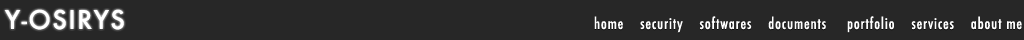
<style>
.page{position:relative;width:1024px;height:40px;background:#272727}
.page>*{position:absolute;margin:0}
.t1{font:25px "Futura-Medium";letter-spacing:0.06em;color:#ffffff}
.t2{font:15px "Futura-CondensedMedium";letter-spacing:0.06em;color:#ffffff}
</style>
<div class="page">
<p class="t1" style="left:4px;top:9px;width:120px;height:21px">Y-OSIRYS</p>
<p class="t2" style="left:594px;top:16px;width:428px;height:17px">home    security    softwares    documents     portfolio    services    about me</p>
</div>
